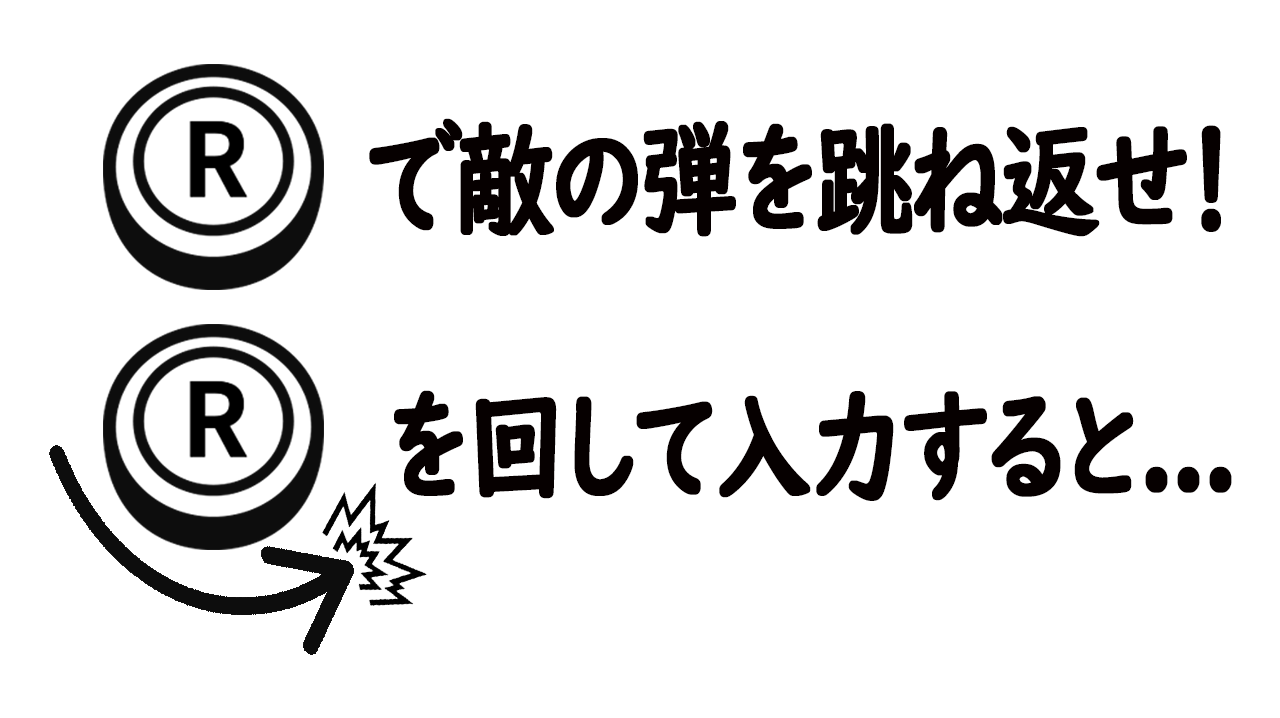
<style>
.page{position:relative;width:1280px;height:718px;background:#ffffff}
.page>*{position:absolute;margin:0}
.t1{font:123.5px "UDDigiKyokashoNK-B";letter-spacing:-0.07em;color:#060000;font-weight:bold;scale:0.79 1}
</style>
<div class="page">
<p class="t1" style="left:369px;top:118px;width:852px;height:119px">で敵の弾を跳ね返せ！</p>
<p class="t1" style="left:394px;top:390px;width:838px;height:111px">を回して入力すると...</p>
</div>
